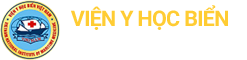
<style>
.page{position:relative;width:247px;height:60px;background:#ffffff}
.page>*{position:absolute;margin:0}
.t1{font:21.4px "Roboto-Bold";letter-spacing:-0.03em;color:#ffcc33}
</style>
<div class="page">
<p class="t1" style="left:71px;top:5px;width:157px;height:25px">VIỆN Y HỌC BIỂN</p>
</div>
